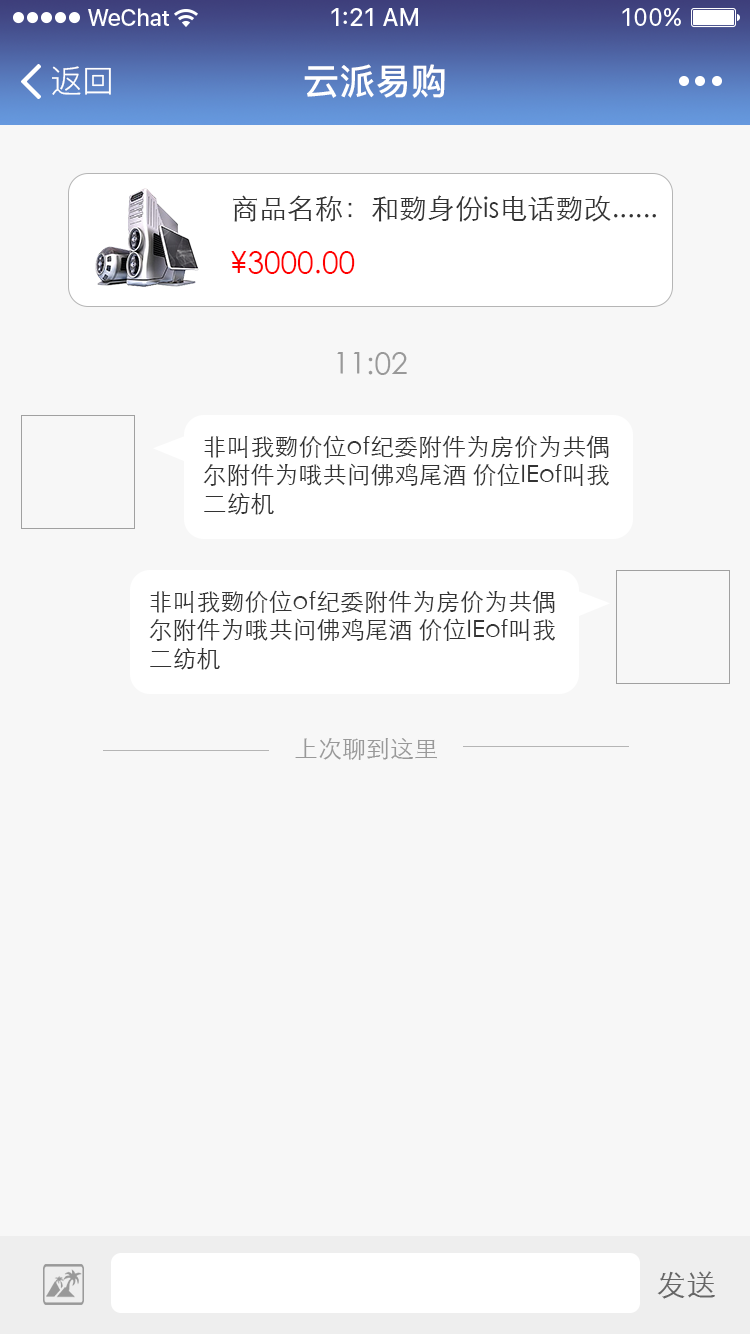
<style>
.page{position:relative;width:750px;height:1334px;background:#f7f7f7}
.page>*{position:absolute;margin:0}
.t1{font:36px "PingFang-SC-Bold";color:#ffffff}
.t2{font:32px "PingFang-SC-Regular";color:#ffffff}
.t3{font:28px "STXihei";color:#333333}
.t4{font:30px "STXihei";color:#ff0000}
.t5{font:30px "STXihei";color:#999999}
.t6{font:24px "STXihei";color:#333333}
.t7{font:24px "STXihei";color:#999999}
.t8{font:30px "STXihei";color:#666666}
</style>
<div class="page">
<p class="t1" style="left:304px;top:64px;width:141px;height:34px">云派易购</p>
<p class="t2" style="left:52px;top:66px;width:59px;height:29px">返回</p>
<p class="t3" style="left:233px;top:195px;width:423px;height:27px">商品名称：和覅身份is电话覅改......</p>
<p class="t4" style="left:231px;top:251px;width:124px;height:23px">¥3000.00</p>
<p class="t5" style="left:337px;top:352px;width:70px;height:23px">11:02</p>
<p class="t6" style="left:203px;top:435px;width:406px;height:80px">非叫我覅价位of纪委附件为房价为共偶尔附件为哦共问佛鸡尾酒 价位IEof叫我二纺机</p>
<p class="t6" style="left:149px;top:590px;width:406px;height:80px">非叫我覅价位of纪委附件为房价为共偶尔附件为哦共问佛鸡尾酒 价位IEof叫我二纺机</p>
<p class="t7" style="left:295px;top:738px;width:142px;height:22px">上次聊到这里</p>
<p class="t8" style="left:657px;top:1271px;width:58px;height:28px">发送</p>
</div>
